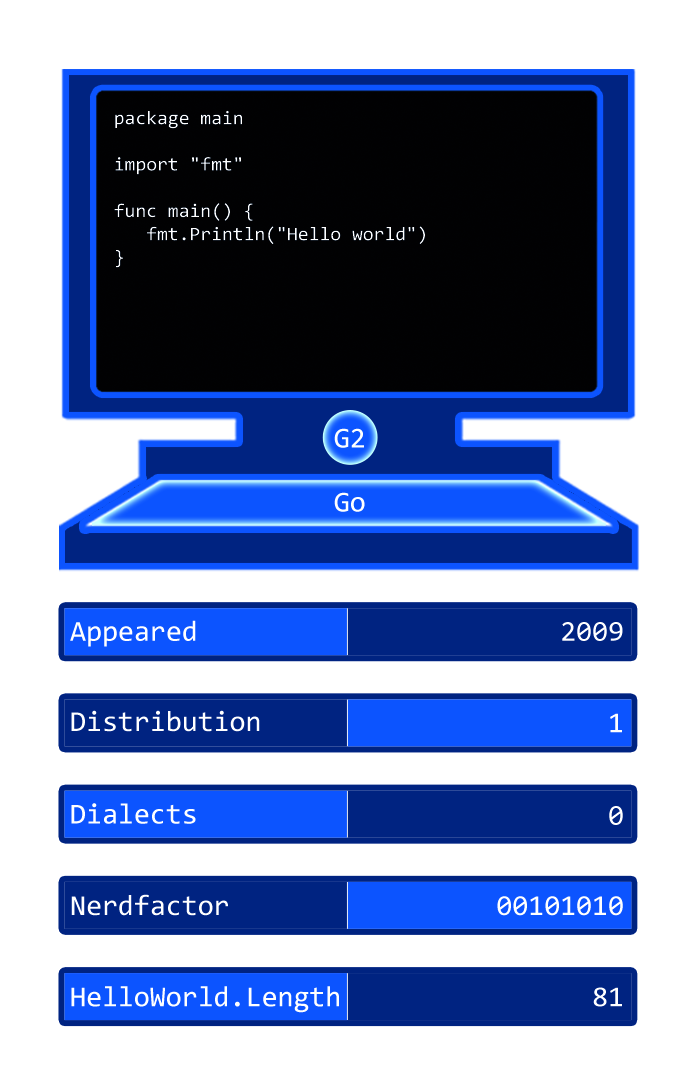
<style>
.page{position:relative;width:697px;height:1087px;background:#ffffff}
.page>*{position:absolute;margin:0}
.t1{font:19.3px "Consolas";color:#ffffff}
.t2{font:29px "Consolas";color:#ffffff}
</style>
<div class="page">
<p class="t1" style="left:114px;top:110px;width:311px;height:158px">package main<br> <br>import "fmt"<br> <br>func main() {<br>   fmt.Println("Hello world")<br>}</p>
<p class="t2" style="left:334px;top:428px;width:30px;height:20px">G2</p>
<p class="t2" style="left:334px;top:492px;width:31px;height:20px">Go</p>
<p class="t2" style="left:70px;top:620px;width:126px;height:27px">Appeared</p>
<p class="t2" style="left:562px;top:622px;width:61px;height:19px">2009</p>
<p class="t2" style="left:71px;top:710px;width:189px;height:22px">Distribution</p>
<p class="t2" style="left:610px;top:713px;width:12px;height:20px">1</p>
<p class="t2" style="left:71px;top:803px;width:125px;height:21px">Dialects</p>
<p class="t2" style="left:609px;top:806px;width:14px;height:19px">0</p>
<p class="t2" style="left:71px;top:894px;width:157px;height:22px">Nerdfactor</p>
<p class="t2" style="left:497px;top:896px;width:126px;height:20px">00101010</p>
<p class="t2" style="left:71px;top:986px;width:268px;height:27px">HelloWorld.Length</p>
<p class="t2" style="left:593px;top:987px;width:29px;height:20px">81</p>
</div>
